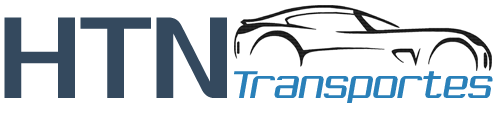
<style>
.page{position:relative;width:500px;height:115px;background:#ffffff}
.page>*{position:absolute;margin:0}
.t1{font:115px "RobustikRegular";color:#34495e}
.t2{font:38px "RobustikLightOblique";color:#2980b9}
</style>
<div class="page">
<p class="t1" style="left:4px;top:17px;width:223px;height:81px">HTN</p>
<p class="t2" style="left:234px;top:71px;width:259px;height:32px">Transportes</p>
</div>
